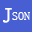
<style>
.page{position:relative;width:32px;height:32px;background:#485fd3}
.page>*{position:absolute;margin:0}
.t1{font:12px "SimSun";color:#ffffff}
.t2{font:18px "SimSun";color:#ffffff;font-weight:bold}
</style>
<div class="page">
<p class="t1" style="left:3px;top:8px;width:27px;height:15px"><span class="t2">J</span>SON</p>
</div>
